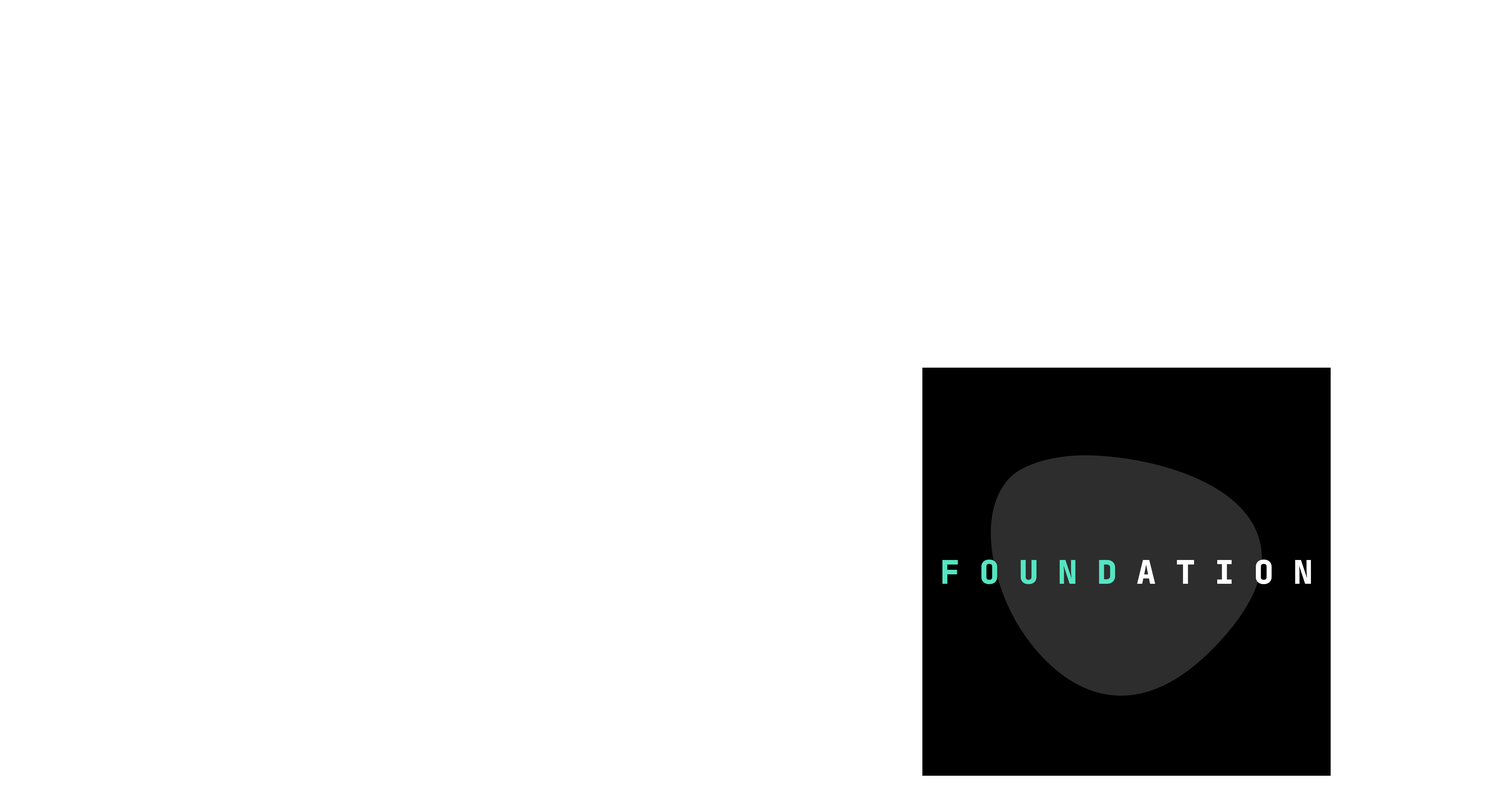
<style>
.page{position:relative;width:1500px;height:795px;background:#ffffff}
.page>*{position:absolute;margin:0}
.t1{font:32.7px "JetBrainsMono-ExtraBold";letter-spacing:0.6em;color:#55e5c2}
.t2{font:32.7px "JetBrainsMono-ExtraBold";letter-spacing:0.6em;color:#ffffff}
</style>
<div class="page">
<p class="t1" style="left:942px;top:560px;width:369px;height:24px">FOUND<span class="t2">ATION</span></p>
</div>
